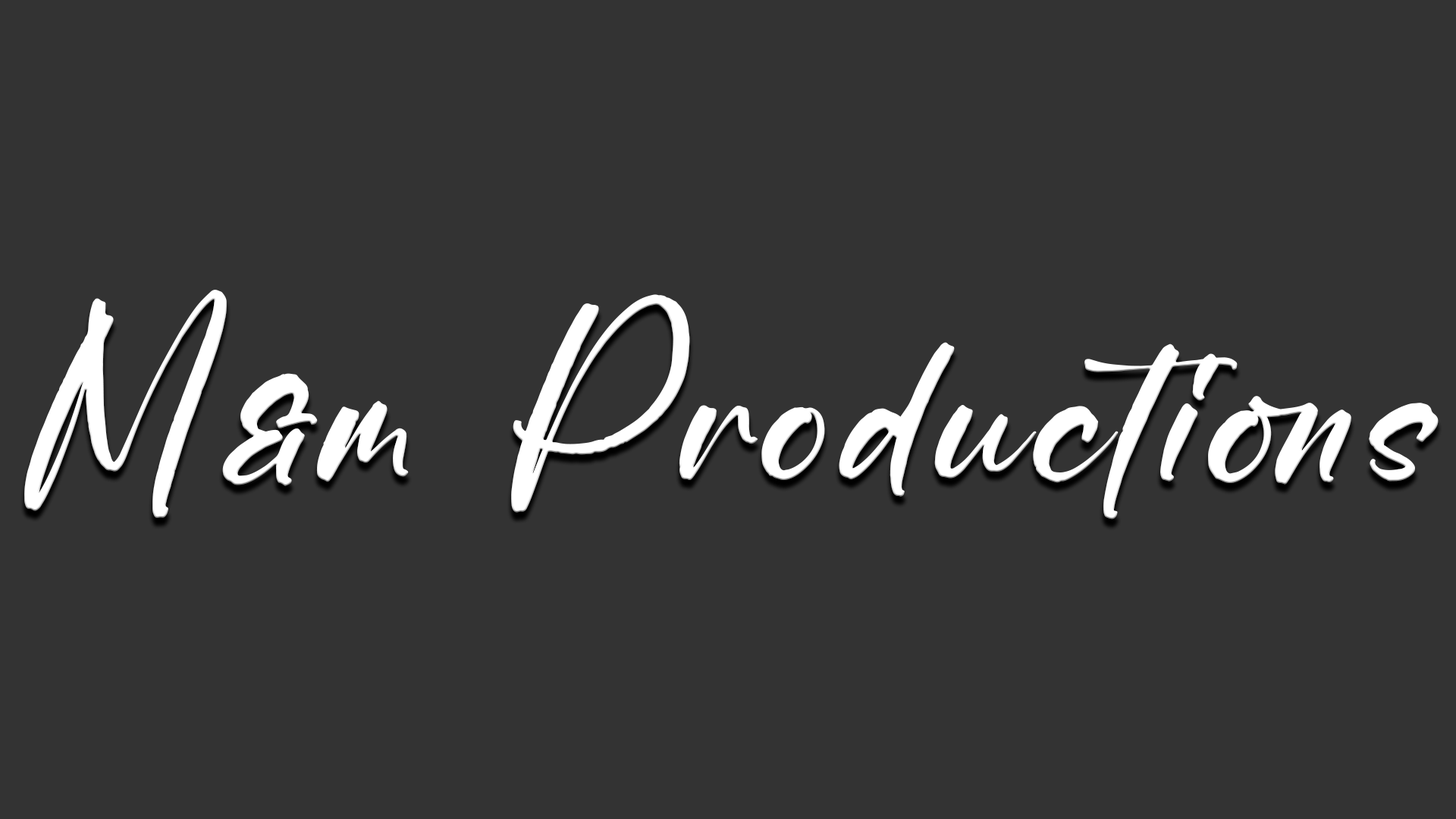
<style>
.page{position:relative;width:1456px;height:819px;background:#333333}
.page>*{position:absolute;margin:0}
.t1{font:216.3px "Santallria";letter-spacing:0.04em;color:#ffffff}
</style>
<div class="page">
<p class="t1" style="left:24px;top:290px;width:1415px;height:229px">M&amp;m Productions</p>
</div>
